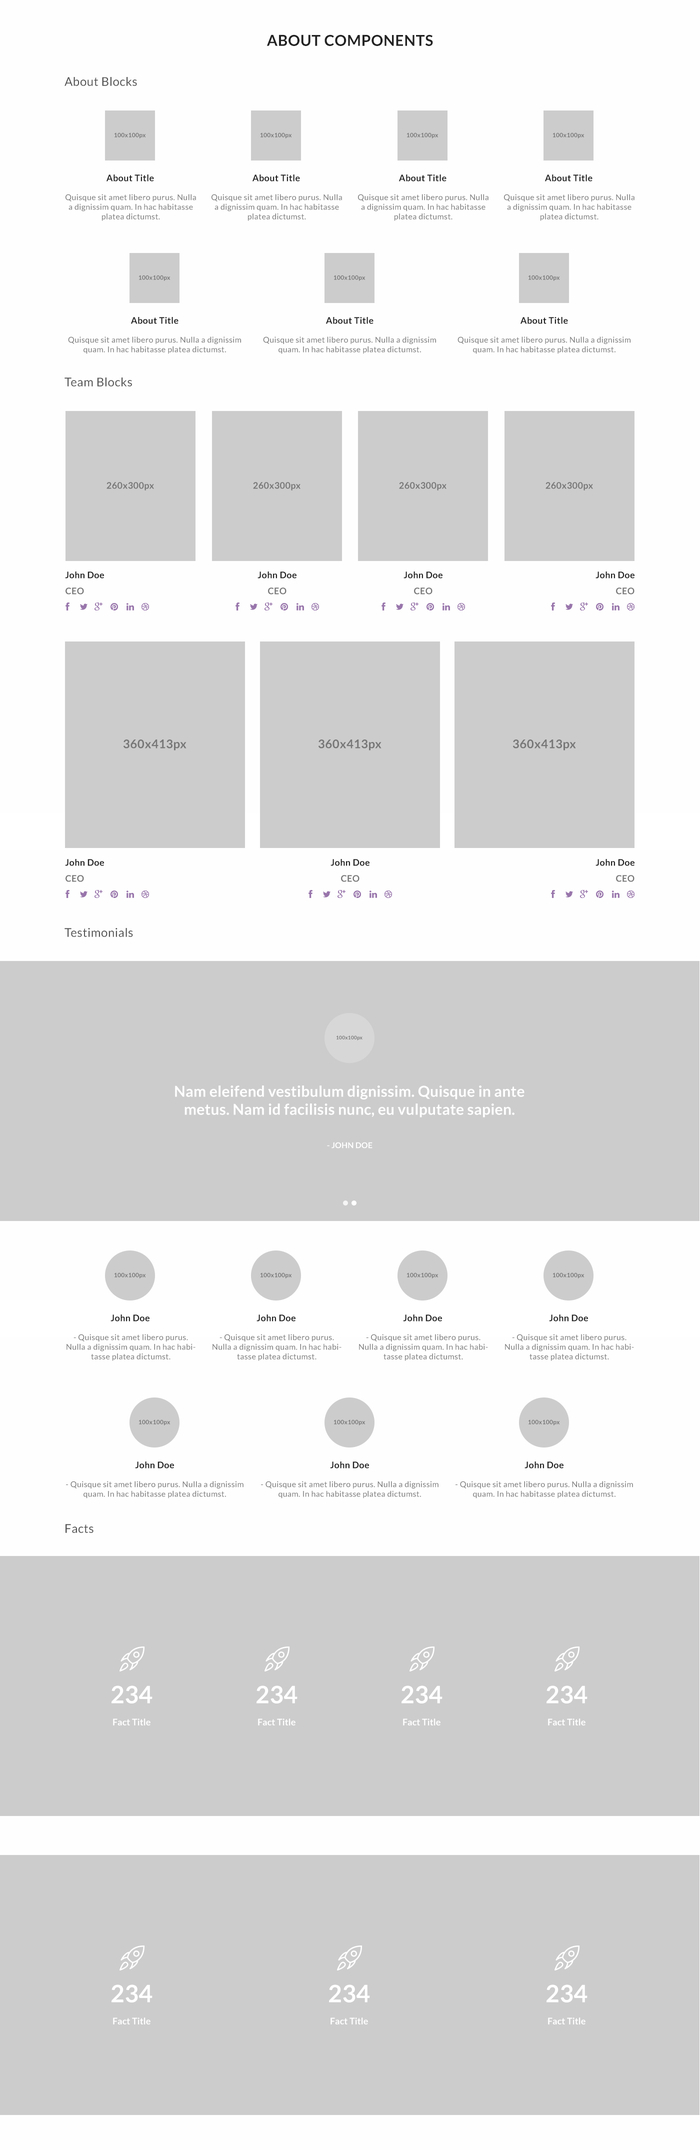
<style>
.page{position:relative;width:700px;height:2150px;background:#cccccc}
.page>*{position:absolute;margin:0}
.t1{font:15px "Lato-Bold";letter-spacing:0.025em;color:#222222}
.t2{font:12px "Lato-Regular";letter-spacing:0.025em;color:#555555}
.t3{font:6px "Lato-Bold";letter-spacing:0.025em;color:#777777}
.t4{font:9px "Lato-Bold";letter-spacing:0.025em;color:#222222}
.t5{font:8px "Lato-Regular";letter-spacing:0.025em;color:#777777}
.t6{font:9px "Lato-Bold";letter-spacing:0.025em;color:#777777}
.t7{font:12px "Lato-Bold";letter-spacing:0.025em;color:#777777}
.t8{font:5px "Lato-Bold";letter-spacing:0.025em;color:#777777}
.t9{font:15px "Lato-Bold";letter-spacing:0.01em;color:#ffffff}
.t10{font:8px "Lato-Bold";letter-spacing:0.01em;color:#ffffff}
.t11{font:24px "Lato-Bold";letter-spacing:0.005em;color:#ffffff}
.t12{font:9px "Lato-Bold";letter-spacing:0.005em;color:#ffffff}
</style>
<div class="page">
<p class="t1" style="left:266px;top:34px;width:167px;height:12px">ABOUT COMPONENTS</p>
<p class="t2" style="left:64px;top:77px;width:73px;height:9px">About Blocks</p>
<p class="t3" style="left:114px;top:132px;width:32px;height:6px">100x100px</p>
<p class="t3" style="left:260px;top:132px;width:32px;height:6px">100x100px</p>
<p class="t3" style="left:406px;top:132px;width:32px;height:6px">100x100px</p>
<p class="t3" style="left:552px;top:132px;width:32px;height:6px">100x100px</p>
<p class="t4" style="left:106px;top:174px;width:48px;height:8px">About Title</p>
<p class="t4" style="left:252px;top:174px;width:48px;height:8px">About Title</p>
<p class="t4" style="left:398px;top:174px;width:48px;height:8px">About Title</p>
<p class="t4" style="left:544px;top:174px;width:48px;height:8px">About Title</p>
<p class="t5" style="left:66px;top:194px;width:130px;height:27px;text-align:center">Quisque sit amet libero purus. Nulla a dignissim quam. In hac habitasse platea dictumst.</p>
<p class="t5" style="left:212px;top:194px;width:130px;height:27px;text-align:center">Quisque sit amet libero purus. Nulla a dignissim quam. In hac habitasse platea dictumst.</p>
<p class="t5" style="left:358px;top:194px;width:130px;height:27px;text-align:center">Quisque sit amet libero purus. Nulla a dignissim quam. In hac habitasse platea dictumst.</p>
<p class="t5" style="left:504px;top:194px;width:130px;height:27px;text-align:center">Quisque sit amet libero purus. Nulla a dignissim quam. In hac habitasse platea dictumst.</p>
<p class="t3" style="left:138px;top:275px;width:32px;height:6px">100x100px</p>
<p class="t3" style="left:334px;top:275px;width:32px;height:6px">100x100px</p>
<p class="t3" style="left:528px;top:275px;width:32px;height:6px">100x100px</p>
<p class="t4" style="left:130px;top:317px;width:48px;height:7px">About Title</p>
<p class="t4" style="left:326px;top:317px;width:48px;height:7px">About Title</p>
<p class="t4" style="left:520px;top:317px;width:48px;height:7px">About Title</p>
<p class="t5" style="left:68px;top:336px;width:173px;height:18px;text-align:center">Quisque sit amet libero purus. Nulla a dignissim quam. In hac habitasse platea dictumst.</p>
<p class="t5" style="left:263px;top:336px;width:173px;height:18px;text-align:center">Quisque sit amet libero purus. Nulla a dignissim quam. In hac habitasse platea dictumst.</p>
<p class="t5" style="left:458px;top:336px;width:172px;height:18px;text-align:center">Quisque sit amet libero purus. Nulla a dignissim quam. In hac habitasse platea dictumst.</p>
<p class="t2" style="left:64px;top:378px;width:68px;height:8px">Team Blocks</p>
<p class="t6" style="left:106px;top:482px;width:48px;height:8px">260x300px</p>
<p class="t6" style="left:253px;top:482px;width:47px;height:8px">260x300px</p>
<p class="t6" style="left:399px;top:482px;width:47px;height:8px">260x300px</p>
<p class="t6" style="left:546px;top:482px;width:47px;height:8px">260x300px</p>
<p class="t4" style="left:65px;top:572px;width:39px;height:6px">John Doe</p>
<p class="t4" style="left:258px;top:572px;width:38px;height:6px">John Doe</p>
<p class="t4" style="left:404px;top:572px;width:38px;height:6px">John Doe</p>
<p class="t4" style="left:596px;top:572px;width:38px;height:6px">John Doe</p>
<p class="t6" style="left:66px;top:588px;width:18px;height:6px">CEO</p>
<p class="t6" style="left:268px;top:588px;width:18px;height:6px">CEO</p>
<p class="t6" style="left:414px;top:588px;width:18px;height:6px">CEO</p>
<p class="t6" style="left:616px;top:588px;width:18px;height:6px">CEO</p>
<p class="t7" style="left:123px;top:740px;width:63px;height:10px">360x413px</p>
<p class="t7" style="left:318px;top:740px;width:64px;height:10px">360x413px</p>
<p class="t7" style="left:512px;top:740px;width:64px;height:10px">360x413px</p>
<p class="t4" style="left:65px;top:859px;width:39px;height:7px">John Doe</p>
<p class="t4" style="left:330px;top:859px;width:40px;height:7px">John Doe</p>
<p class="t4" style="left:596px;top:859px;width:38px;height:7px">John Doe</p>
<p class="t6" style="left:66px;top:875px;width:18px;height:7px">CEO</p>
<p class="t6" style="left:341px;top:875px;width:19px;height:7px">CEO</p>
<p class="t6" style="left:616px;top:875px;width:18px;height:7px">CEO</p>
<p class="t2" style="left:64px;top:928px;width:69px;height:9px">Testimonials</p>
<p class="t8" style="left:336px;top:1036px;width:26px;height:4px">100x100px</p>
<p class="t9" style="left:175px;top:1086px;width:349px;height:32px;text-align:center">Nam eleifend vestibulum dignissim. Quisque in ante metus. Nam id facilisis nunc, eu vulputate sapien.</p>
<p class="t10" style="left:327px;top:1142px;width:45px;height:6px">- JOHN DOE</p>
<p class="t3" style="left:114px;top:1272px;width:32px;height:6px">100x100px</p>
<p class="t3" style="left:260px;top:1272px;width:32px;height:6px">100x100px</p>
<p class="t3" style="left:406px;top:1272px;width:32px;height:6px">100x100px</p>
<p class="t3" style="left:552px;top:1272px;width:32px;height:6px">100x100px</p>
<p class="t4" style="left:110px;top:1314px;width:40px;height:8px">John Doe</p>
<p class="t4" style="left:256px;top:1314px;width:40px;height:8px">John Doe</p>
<p class="t4" style="left:403px;top:1314px;width:39px;height:8px">John Doe</p>
<p class="t4" style="left:549px;top:1314px;width:39px;height:8px">John Doe</p>
<p class="t5" style="left:66px;top:1334px;width:130px;height:27px;text-align:center">- Quisque sit amet libero purus. Nulla a dignissim quam. In hac habitasse platea dictumst.</p>
<p class="t5" style="left:212px;top:1334px;width:130px;height:27px;text-align:center">- Quisque sit amet libero purus. Nulla a dignissim quam. In hac habitasse platea dictumst.</p>
<p class="t5" style="left:359px;top:1334px;width:129px;height:27px;text-align:center">- Quisque sit amet libero purus. Nulla a dignissim quam. In hac habitasse platea dictumst.</p>
<p class="t5" style="left:505px;top:1334px;width:129px;height:27px;text-align:center">- Quisque sit amet libero purus. Nulla a dignissim quam. In hac habitasse platea dictumst.</p>
<p class="t3" style="left:138px;top:1420px;width:32px;height:6px">100x100px</p>
<p class="t3" style="left:334px;top:1420px;width:32px;height:6px">100x100px</p>
<p class="t3" style="left:528px;top:1420px;width:32px;height:6px">100x100px</p>
<p class="t4" style="left:135px;top:1462px;width:39px;height:6px">John Doe</p>
<p class="t4" style="left:330px;top:1462px;width:39px;height:6px">John Doe</p>
<p class="t4" style="left:524px;top:1462px;width:40px;height:6px">John Doe</p>
<p class="t5" style="left:66px;top:1481px;width:178px;height:17px;text-align:center">- Quisque sit amet libero purus. Nulla a dignissim quam. In hac habitasse platea dictumst.</p>
<p class="t5" style="left:261px;top:1481px;width:177px;height:17px;text-align:center">- Quisque sit amet libero purus. Nulla a dignissim quam. In hac habitasse platea dictumst.</p>
<p class="t5" style="left:456px;top:1481px;width:177px;height:17px;text-align:center">- Quisque sit amet libero purus. Nulla a dignissim quam. In hac habitasse platea dictumst.</p>
<p class="t2" style="left:66px;top:1524px;width:28px;height:9px">Facts</p>
<p class="t11" style="left:112px;top:1686px;width:40px;height:18px">234</p>
<p class="t11" style="left:256px;top:1686px;width:42px;height:18px">234</p>
<p class="t11" style="left:402px;top:1686px;width:40px;height:18px">234</p>
<p class="t11" style="left:546px;top:1686px;width:42px;height:18px">234</p>
<p class="t12" style="left:113px;top:1718px;width:37px;height:8px">Fact Title</p>
<p class="t12" style="left:258px;top:1718px;width:38px;height:8px">Fact Title</p>
<p class="t12" style="left:403px;top:1718px;width:37px;height:8px">Fact Title</p>
<p class="t12" style="left:548px;top:1718px;width:38px;height:8px">Fact Title</p>
<p class="t11" style="left:112px;top:1984px;width:40px;height:18px">234</p>
<p class="t11" style="left:329px;top:1984px;width:41px;height:18px">234</p>
<p class="t11" style="left:546px;top:1984px;width:42px;height:18px">234</p>
<p class="t12" style="left:113px;top:2018px;width:37px;height:6px">Fact Title</p>
<p class="t12" style="left:330px;top:2018px;width:38px;height:6px">Fact Title</p>
<p class="t12" style="left:548px;top:2018px;width:38px;height:6px">Fact Title</p>
</div>
